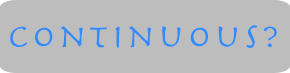
<style>
.page{position:relative;width:290px;height:73px;background:#bdbdbd}
.page>*{position:absolute;margin:0}
.t1{font:34.4px "Herculanum";letter-spacing:0.065em;color:#308bfc;scale:1.12 1}
</style>
<div class="page">
<p class="t1" style="left:10px;top:25px;width:267px;height:23px">continuous?</p>
</div>
